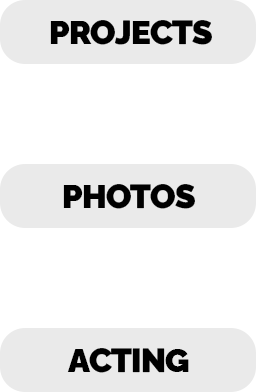
<style>
.page{position:relative;width:256px;height:392px;background:#ffffff}
.page>*{position:absolute;margin:0}
.t1{font:33.3px "RalewayRoman-Black";letter-spacing:-0.025em;color:#000000}
</style>
<div class="page">
<p class="t1" style="left:50px;top:20px;width:162px;height:25px">PROJECTS</p>
<p class="t1" style="left:63px;top:184px;width:132px;height:25px">PHOTOS</p>
<p class="t1" style="left:67px;top:348px;width:122px;height:25px">ACTING</p>
</div>
